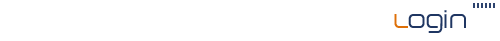
<style>
.page{position:relative;width:500px;height:41px;background:#ffffff}
.page>*{position:absolute;margin:0}
.t1{font:24px "Birdman";color:#1f3662}
.t2{font:24px "Birdman";color:#de7008}
</style>
<div class="page">
<p class="t1" style="left:394px;top:10px;width:72px;height:23px"><span class="t2">L</span>ogin</p>
</div>
